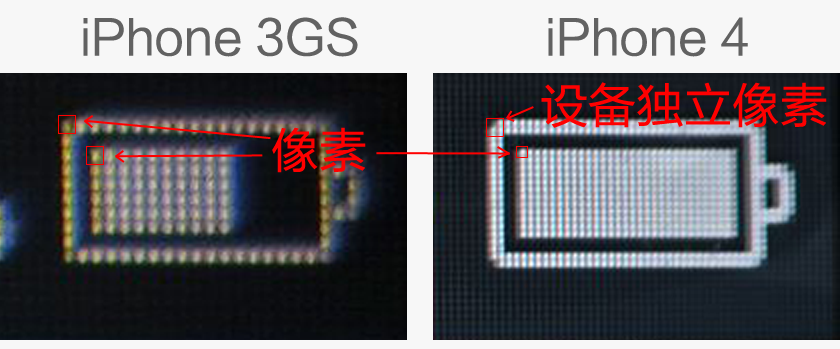
<style>
.page{position:relative;width:840px;height:349px;background:#f7f7f7}
.page>*{position:absolute;margin:0}
.t1{font:48px "FZLTHJW--GB1-0";color:#626262}
.t2{font:48px "FZLTHJW--GB1-0";color:#fe0000}
</style>
<div class="page">
<p class="t1" style="left:83px;top:17px;width:275px;height:40px">iPhone 3GS</p>
<p class="t1" style="left:548px;top:17px;width:200px;height:40px">iPhone 4</p>
<p class="t2" style="left:541px;top:82px;width:286px;height:46px">设备独立像素</p>
<p class="t2" style="left:272px;top:127px;width:94px;height:46px">像素</p>
</div>
